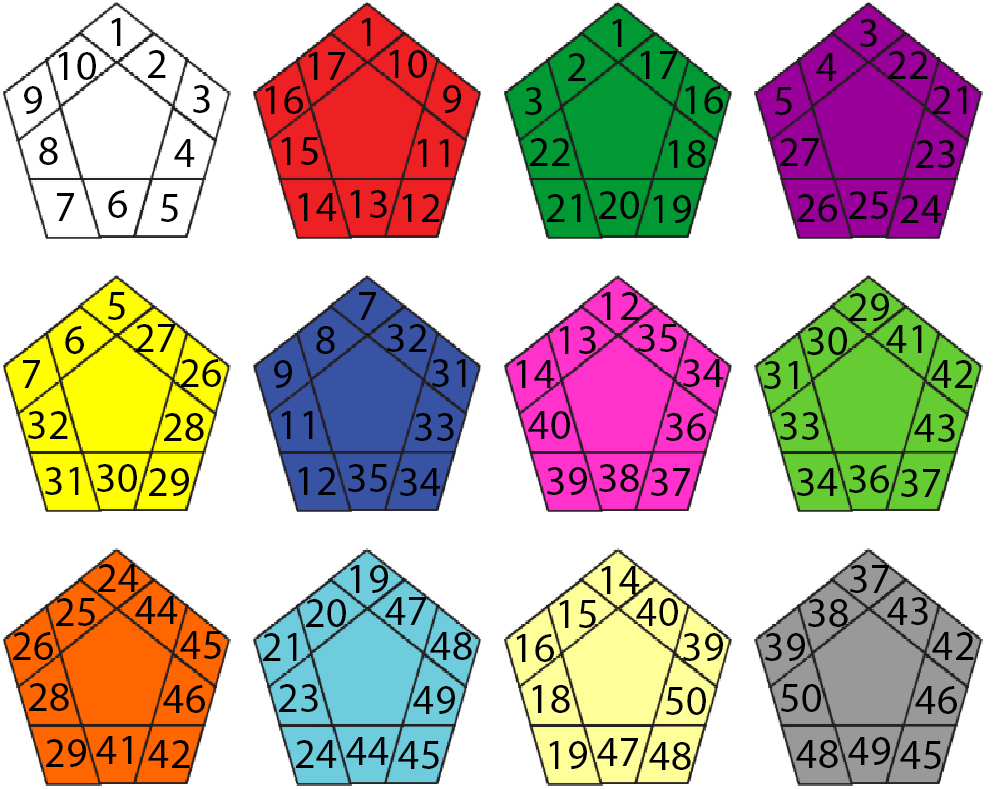
<style>
.page{position:relative;width:1000px;height:789px;background:#ffffff}
.page>*{position:absolute;margin:0}
.t1{font:41.7px "MyriadPro-Regular";color:#000000}
</style>
<div class="page">
<p class="t1" style="left:111px;top:18px;width:10px;height:28px">1</p>
<p class="t1" style="left:361px;top:18px;width:10px;height:28px">1</p>
<p class="t1" style="left:612px;top:19px;width:10px;height:28px">1</p>
<p class="t1" style="left:860px;top:19px;width:17px;height:28px">3</p>
<p class="t1" style="left:58px;top:52px;width:38px;height:28px">10</p>
<p class="t1" style="left:148px;top:50px;width:18px;height:28px">2</p>
<p class="t1" style="left:308px;top:52px;width:37px;height:28px">17</p>
<p class="t1" style="left:389px;top:50px;width:38px;height:28px">10</p>
<p class="t1" style="left:568px;top:53px;width:18px;height:28px">2</p>
<p class="t1" style="left:640px;top:51px;width:37px;height:28px">17</p>
<p class="t1" style="left:816px;top:53px;width:21px;height:28px">4</p>
<p class="t1" style="left:888px;top:51px;width:40px;height:28px">22</p>
<p class="t1" style="left:24px;top:86px;width:18px;height:28px">9</p>
<p class="t1" style="left:193px;top:85px;width:17px;height:28px">3</p>
<p class="t1" style="left:265px;top:86px;width:38px;height:28px">16</p>
<p class="t1" style="left:443px;top:85px;width:18px;height:28px">9</p>
<p class="t1" style="left:525px;top:87px;width:17px;height:28px">3</p>
<p class="t1" style="left:685px;top:86px;width:38px;height:28px">16</p>
<p class="t1" style="left:775px;top:87px;width:17px;height:28px">5</p>
<p class="t1" style="left:933px;top:86px;width:34px;height:28px">21</p>
<p class="t1" style="left:39px;top:137px;width:19px;height:28px">8</p>
<p class="t1" style="left:281px;top:137px;width:37px;height:28px">15</p>
<p class="t1" style="left:174px;top:139px;width:21px;height:28px">4</p>
<p class="t1" style="left:417px;top:139px;width:32px;height:28px">11</p>
<p class="t1" style="left:530px;top:138px;width:40px;height:28px">22</p>
<p class="t1" style="left:668px;top:140px;width:38px;height:28px">18</p>
<p class="t1" style="left:780px;top:138px;width:39px;height:28px">27</p>
<p class="t1" style="left:916px;top:140px;width:39px;height:28px">23</p>
<p class="t1" style="left:57px;top:193px;width:17px;height:28px">7</p>
<p class="t1" style="left:108px;top:190px;width:19px;height:28px">6</p>
<p class="t1" style="left:161px;top:194px;width:17px;height:28px">5</p>
<p class="t1" style="left:298px;top:193px;width:39px;height:28px">14</p>
<p class="t1" style="left:350px;top:190px;width:37px;height:28px">13</p>
<p class="t1" style="left:402px;top:194px;width:38px;height:28px">12</p>
<p class="t1" style="left:547px;top:194px;width:34px;height:28px">21</p>
<p class="t1" style="left:599px;top:191px;width:40px;height:28px">20</p>
<p class="t1" style="left:653px;top:195px;width:38px;height:28px">19</p>
<p class="t1" style="left:797px;top:194px;width:40px;height:28px">26</p>
<p class="t1" style="left:849px;top:191px;width:39px;height:28px">25</p>
<p class="t1" style="left:901px;top:195px;width:41px;height:28px">24</p>
<p class="t1" style="left:108px;top:292px;width:17px;height:28px">5</p>
<p class="t1" style="left:359px;top:292px;width:17px;height:28px">7</p>
<p class="t1" style="left:601px;top:292px;width:38px;height:28px">12</p>
<p class="t1" style="left:849px;top:293px;width:40px;height:28px">29</p>
<p class="t1" style="left:65px;top:326px;width:19px;height:28px">6</p>
<p class="t1" style="left:136px;top:324px;width:39px;height:28px">27</p>
<p class="t1" style="left:316px;top:326px;width:19px;height:28px">8</p>
<p class="t1" style="left:387px;top:324px;width:40px;height:28px">32</p>
<p class="t1" style="left:559px;top:326px;width:37px;height:28px">13</p>
<p class="t1" style="left:638px;top:324px;width:39px;height:28px">35</p>
<p class="t1" style="left:807px;top:327px;width:40px;height:28px">30</p>
<p class="t1" style="left:886px;top:325px;width:36px;height:28px">41</p>
<p class="t1" style="left:23px;top:360px;width:17px;height:28px">7</p>
<p class="t1" style="left:181px;top:359px;width:40px;height:28px">26</p>
<p class="t1" style="left:274px;top:360px;width:18px;height:28px">9</p>
<p class="t1" style="left:432px;top:359px;width:34px;height:28px">31</p>
<p class="t1" style="left:516px;top:360px;width:39px;height:28px">14</p>
<p class="t1" style="left:683px;top:359px;width:41px;height:28px">34</p>
<p class="t1" style="left:764px;top:361px;width:34px;height:28px">31</p>
<p class="t1" style="left:931px;top:360px;width:42px;height:28px">42</p>
<p class="t1" style="left:28px;top:411px;width:40px;height:28px">32</p>
<p class="t1" style="left:164px;top:413px;width:40px;height:28px">28</p>
<p class="t1" style="left:281px;top:411px;width:32px;height:28px">11</p>
<p class="t1" style="left:415px;top:413px;width:39px;height:28px">33</p>
<p class="t1" style="left:528px;top:411px;width:42px;height:28px">40</p>
<p class="t1" style="left:666px;top:413px;width:40px;height:28px">36</p>
<p class="t1" style="left:780px;top:412px;width:39px;height:28px">33</p>
<p class="t1" style="left:914px;top:414px;width:41px;height:28px">43</p>
<p class="t1" style="left:45px;top:467px;width:34px;height:28px">31</p>
<p class="t1" style="left:97px;top:464px;width:40px;height:28px">30</p>
<p class="t1" style="left:149px;top:468px;width:40px;height:28px">29</p>
<p class="t1" style="left:298px;top:467px;width:38px;height:28px">12</p>
<p class="t1" style="left:348px;top:464px;width:39px;height:28px">35</p>
<p class="t1" style="left:400px;top:468px;width:41px;height:28px">34</p>
<p class="t1" style="left:547px;top:467px;width:40px;height:28px">39</p>
<p class="t1" style="left:599px;top:464px;width:40px;height:28px">38</p>
<p class="t1" style="left:651px;top:468px;width:39px;height:28px">37</p>
<p class="t1" style="left:797px;top:468px;width:41px;height:28px">34</p>
<p class="t1" style="left:849px;top:465px;width:40px;height:28px">36</p>
<p class="t1" style="left:901px;top:469px;width:39px;height:28px">37</p>
<p class="t1" style="left:98px;top:564px;width:41px;height:28px">24</p>
<p class="t1" style="left:350px;top:565px;width:38px;height:28px">19</p>
<p class="t1" style="left:601px;top:566px;width:39px;height:28px">14</p>
<p class="t1" style="left:850px;top:565px;width:39px;height:28px">37</p>
<p class="t1" style="left:56px;top:598px;width:39px;height:28px">25</p>
<p class="t1" style="left:135px;top:596px;width:43px;height:28px">44</p>
<p class="t1" style="left:306px;top:599px;width:40px;height:28px">20</p>
<p class="t1" style="left:385px;top:597px;width:41px;height:28px">47</p>
<p class="t1" style="left:559px;top:600px;width:37px;height:28px">15</p>
<p class="t1" style="left:636px;top:598px;width:42px;height:28px">40</p>
<p class="t1" style="left:808px;top:599px;width:40px;height:28px">38</p>
<p class="t1" style="left:887px;top:597px;width:41px;height:28px">43</p>
<p class="t1" style="left:13px;top:632px;width:40px;height:28px">26</p>
<p class="t1" style="left:180px;top:631px;width:41px;height:28px">45</p>
<p class="t1" style="left:263px;top:633px;width:34px;height:28px">21</p>
<p class="t1" style="left:430px;top:632px;width:42px;height:28px">48</p>
<p class="t1" style="left:516px;top:634px;width:38px;height:28px">16</p>
<p class="t1" style="left:683px;top:633px;width:40px;height:28px">39</p>
<p class="t1" style="left:765px;top:633px;width:40px;height:28px">39</p>
<p class="t1" style="left:932px;top:632px;width:42px;height:28px">42</p>
<p class="t1" style="left:29px;top:683px;width:40px;height:28px">28</p>
<p class="t1" style="left:163px;top:685px;width:42px;height:28px">46</p>
<p class="t1" style="left:279px;top:684px;width:39px;height:28px">23</p>
<p class="t1" style="left:413px;top:686px;width:42px;height:28px">49</p>
<p class="t1" style="left:532px;top:685px;width:38px;height:28px">18</p>
<p class="t1" style="left:666px;top:687px;width:40px;height:28px">50</p>
<p class="t1" style="left:781px;top:684px;width:40px;height:28px">50</p>
<p class="t1" style="left:915px;top:686px;width:42px;height:28px">46</p>
<p class="t1" style="left:96px;top:736px;width:36px;height:28px">41</p>
<p class="t1" style="left:346px;top:737px;width:43px;height:28px">44</p>
<p class="t1" style="left:848px;top:737px;width:42px;height:28px">49</p>
<p class="t1" style="left:46px;top:739px;width:40px;height:28px">29</p>
<p class="t1" style="left:148px;top:740px;width:42px;height:28px">42</p>
<p class="t1" style="left:296px;top:740px;width:41px;height:28px">24</p>
<p class="t1" style="left:398px;top:741px;width:41px;height:28px">45</p>
<p class="t1" style="left:549px;top:741px;width:38px;height:28px">19</p>
<p class="t1" style="left:597px;top:738px;width:41px;height:28px">47</p>
<p class="t1" style="left:649px;top:742px;width:42px;height:28px">48</p>
<p class="t1" style="left:796px;top:740px;width:42px;height:28px">48</p>
<p class="t1" style="left:900px;top:741px;width:41px;height:28px">45</p>
</div>
